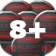
<style>
.page{position:relative;width:56px;height:56px}
.page>*{position:absolute;margin:0}
.t1{font:24px "VerdanaPro-Black";color:#ffffff}
</style>
<div class="page">
<p class="t1" style="left:9px;top:20px;width:37px;height:19px">8+</p>
</div>
